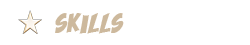
<style>
.page{position:relative;width:250px;height:45px;background:#ffffff}
.page>*{position:absolute;margin:0}
.t1{font:30px "HoustonComicsPersonalUse";color:#cdb99d}
</style>
<div class="page">
<p class="t1" style="left:55px;top:13px;width:69px;height:21px">SKILLS</p>
</div>
